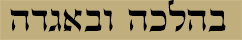
<style>
.page{position:relative;width:242px;height:40px;background:#c0af7c}
.page>*{position:absolute;margin:0}
.t1{font:35.4px "GuttmanMantova";color:#000000}
</style>
<div class="page">
<p class="t1" style="left:10px;top:0px;width:216px;height:32px">בהלכה ובאגדה</p>
</div>
